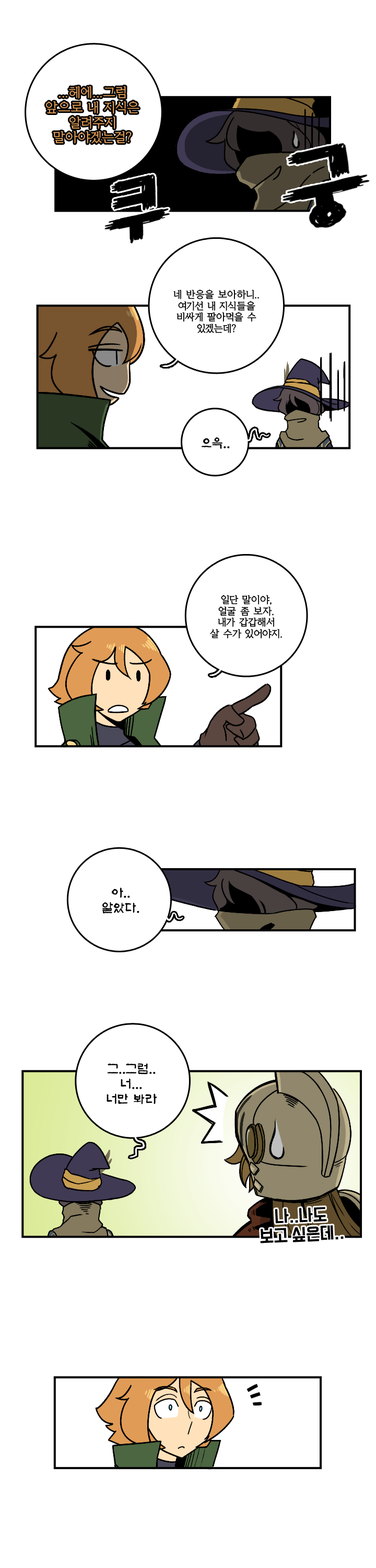
<style>
.page{position:relative;width:376px;height:1568px;background:#ffffff}
.page>*{position:absolute;margin:0}
.t1{font:9.4px "KoreanYMJ-B";color:#000000}
.t2{font:12.5px "KoreanAS-R";color:#000000}
.t3{font:15.7px "TTComsetakR";color:#000000}
</style>
<div class="page">
<p class="t1" style="left:174px;top:290px;width:85px;height:43px;text-align:center">네 반응을 보아하니..<br>여기선 내 지식들을<br>비싸게 팔아먹을 수<br>있겠는데?</p>
<p class="t2" style="left:201px;top:437px;width:29px;height:12px">으윽..</p>
<p class="t1" style="left:210px;top:595px;width:72px;height:44px;text-align:center">일단 말이야,<br>얼굴 좀 보자.<br>내가 갑갑해서<br>살 수가 있어야지.</p>
<p class="t2" style="left:102px;top:887px;width:38px;height:27px;text-align:center">아..<br>알았다.</p>
<p class="t2" style="left:107px;top:1063px;width:50px;height:41px;text-align:center">그..그럼..<br>너...<br>너만 봐라</p>
<p class="t3" style="left:260px;top:1207px;width:84px;height:36px;text-align:center;rotate:-3deg">나..나도<br>보고 싶은데..</p>
</div>
